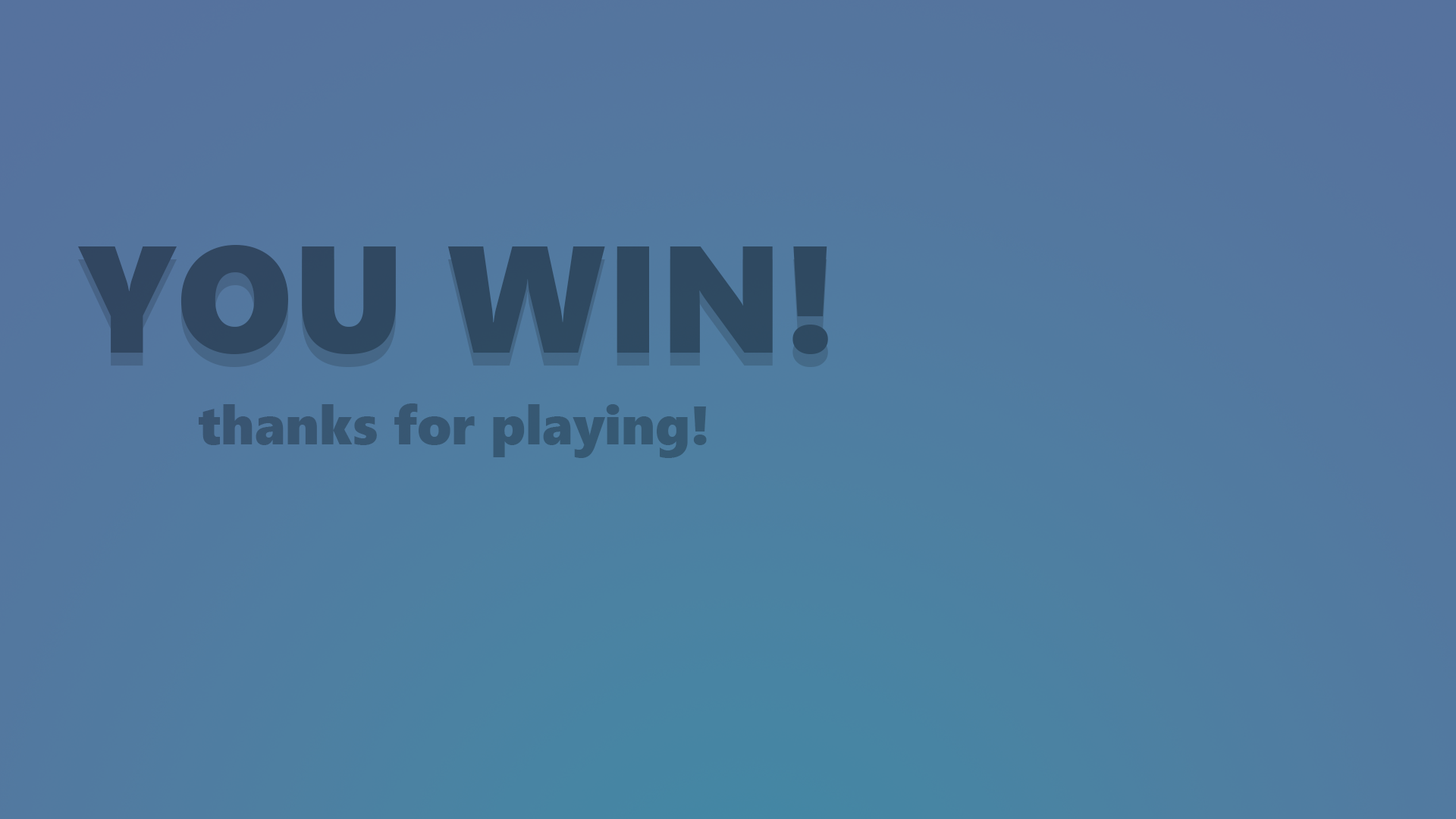
<style>
.page{position:relative;width:1456px;height:819px}
.page>*{position:absolute;margin:0}
.t1{font:151.7px "SegoeUIBlack";color:#2f4961}
.t2{font:54.6px "SegoeUIBlack";color:#375873}
</style>
<div class="page">
<p class="t1" style="left:78px;top:245px;width:750px;height:109px">YOU WIN!</p>
<p class="t2" style="left:199px;top:403px;width:508px;height:55px">thanks for playing!</p>
</div>
